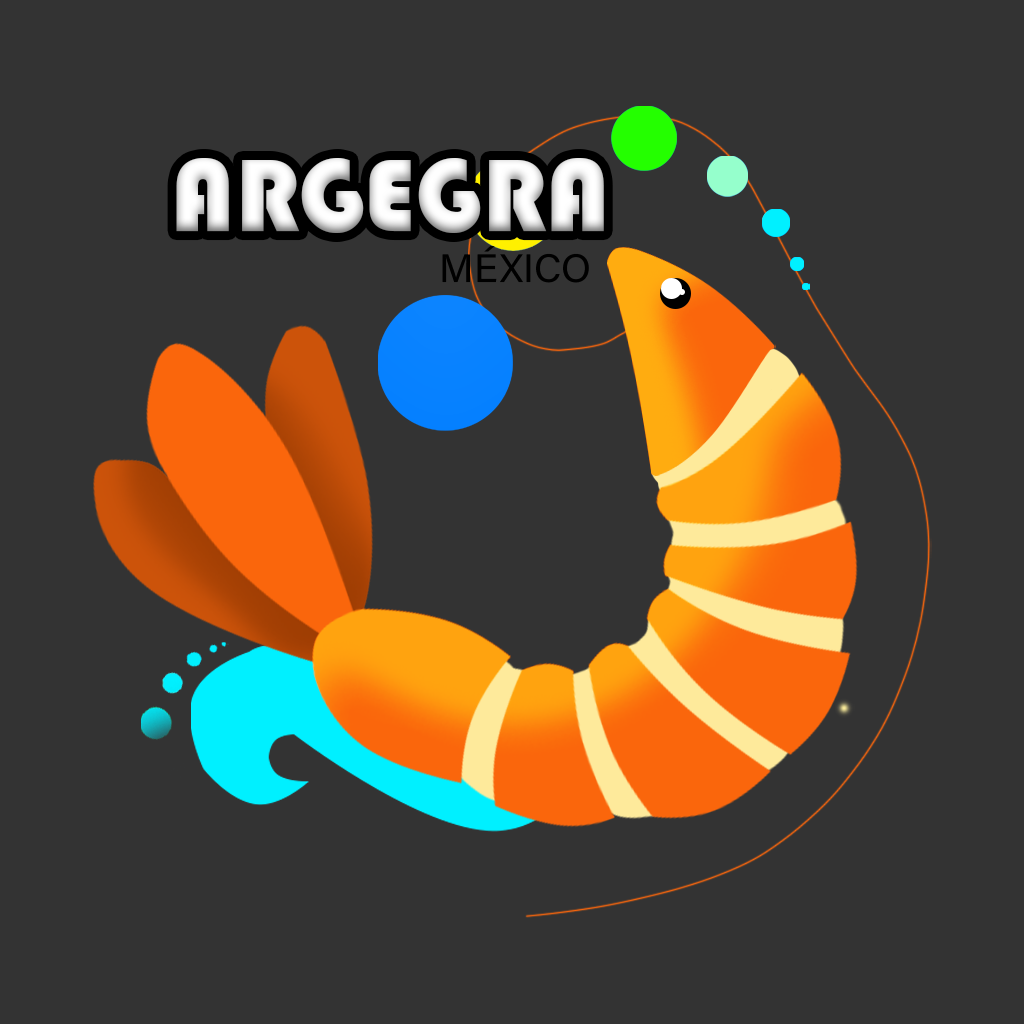
<style>
.page{position:relative;width:1024px;height:1024px;background:#333333}
.page>*{position:absolute;margin:0}
.t1{font:107.1px "Bauhaus93";color:#ffffff}
.t2{font:39.7px "AcuminConcept-Regular";color:#000000}
</style>
<div class="page">
<p class="t1" style="left:176px;top:158px;width:428px;height:75px">ARGEGRA</p>
<p class="t2" style="left:442px;top:246px;width:147px;height:37px">MÉXICO</p>
</div>
